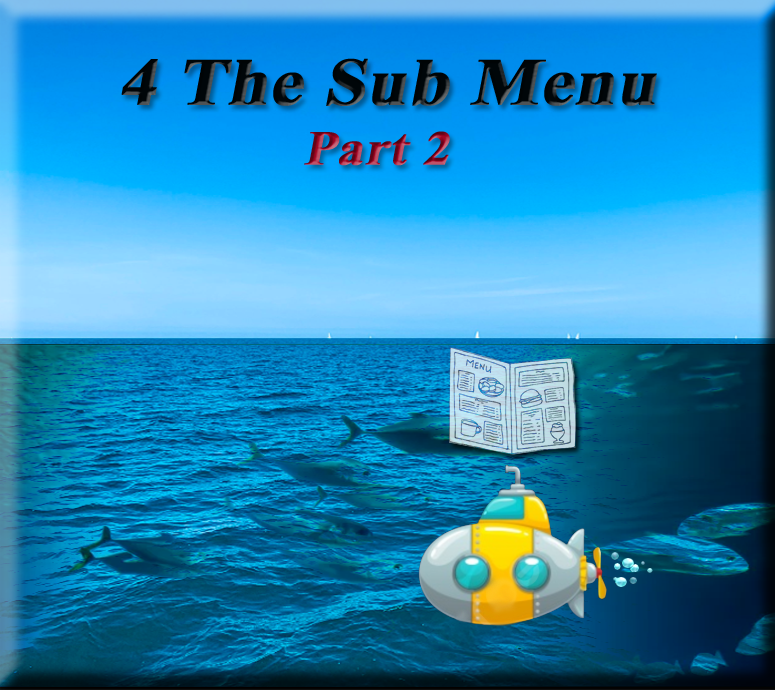
<style>
.page{position:relative;width:775px;height:690px}
.page>*{position:absolute;margin:0}
.t1{font:67px "TimesNewRomanPS-BoldMT";color:#000609;font-weight:bold;font-style:italic;scale:1.08 1}
.t2{font:48.4px "TimesNewRomanPS-BoldMT";font-weight:bold;font-style:italic;scale:1.08 1}
</style>
<div class="page">
<p class="t1" style="left:121px;top:58px;width:536px;height:48px">4 The Sub Menu</p>
<p class="t2" style="left:304px;top:131px;width:146px;height:35px">Part 2</p>
</div>
